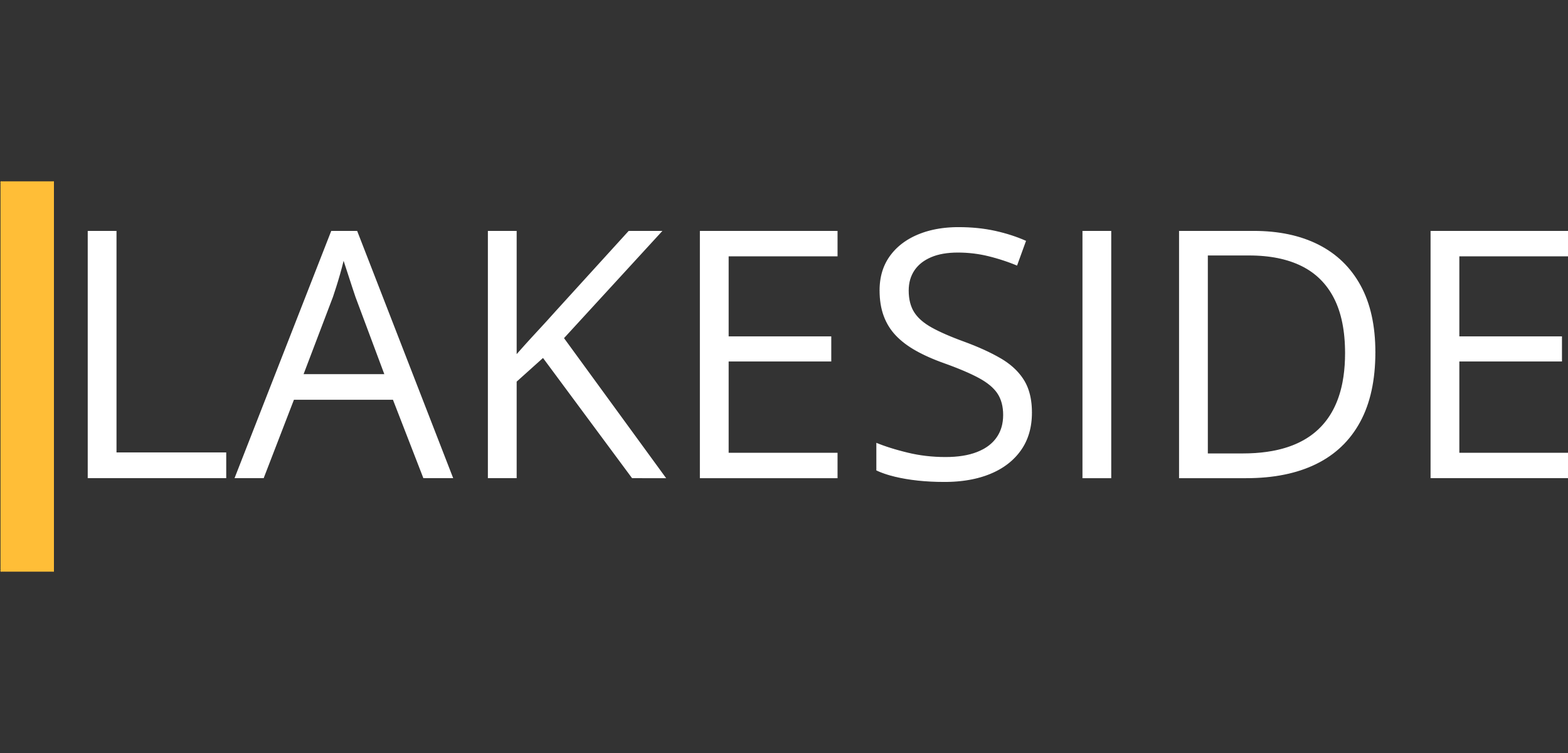
<style>
.page{position:relative;width:1568px;height:753px;background:#333333}
.page>*{position:absolute;margin:0}
.t1{font:346.4px "OpenSans-Regular";color:#ffffff}
</style>
<div class="page">
<p class="t1" style="left:87px;top:227px;width:1482px;height:255px">LAKESIDE</p>
</div>
